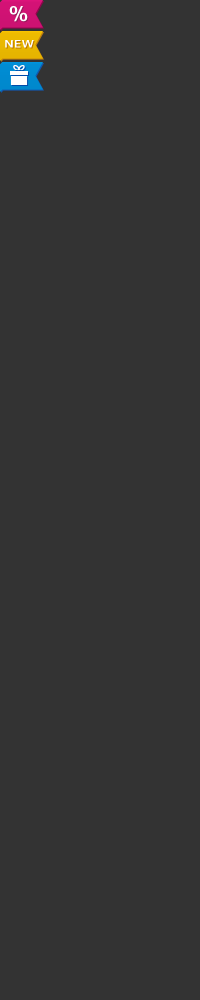
<style>
.page{position:relative;width:200px;height:1000px;background:#333333}
.page>*{position:absolute;margin:0}
.t1{font:21.3px "SiemensSans-Bold";color:#ffffff;text-transform:uppercase;scale:1.18 1}
.t2{font:11px "SiemensSans-Bold";color:#ffffff;text-transform:uppercase;scale:1.23 1}
</style>
<div class="page">
<p class="t1" style="left:9px;top:6px;width:19px;height:16px">%</p>
<p class="t2" style="left:5px;top:40px;width:29px;height:8px">new</p>
</div>
